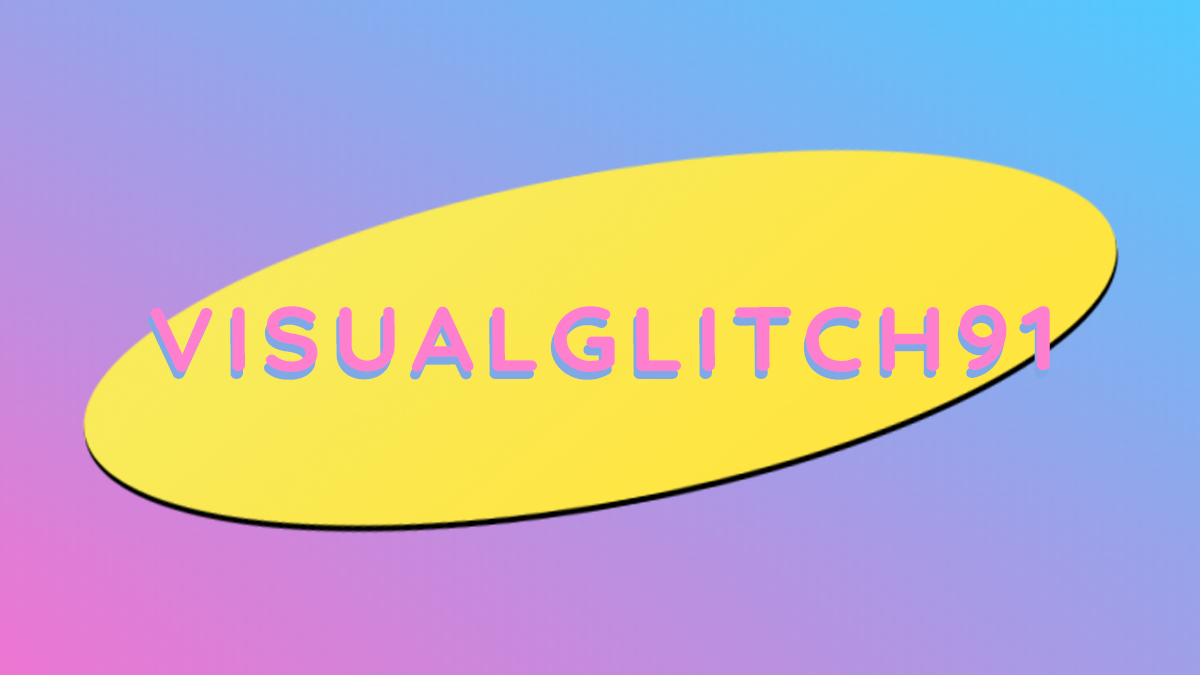
<style>
.page{position:relative;width:1200px;height:675px}
.page>*{position:absolute;margin:0}
.t1{font:91.2px "Quicksand-Bold";letter-spacing:0.1em;color:#ff7fcf;scale:1.09 1}
.t2{font:91.2px "Quicksand-Bold";letter-spacing:0.1em;scale:1.09 1}
</style>
<div class="page">
<p class="t1" style="left:150px;top:305px;width:900px;height:67px">VISUALGLITCH91</p>
<p class="t2" style="left:147px;top:313px;width:901px;height:67px">VISUALGLITCH91</p>
</div>
